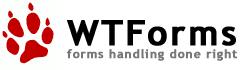
<style>
.page{position:relative;width:250px;height:70px;background:#ffffff}
.page>*{position:absolute;margin:0}
.t1{font:35px "TrebuchetMS-Bold";letter-spacing:0.06em;color:#000000;font-weight:bold}
.t2{font:12px "TrebuchetMS-Bold";letter-spacing:0.06em;color:#777777;font-weight:bold}
</style>
<div class="page">
<p class="t1" style="left:67px;top:20px;width:169px;height:26px">WTForms</p>
<p class="t2" style="left:67px;top:49px;width:170px;height:12px">forms handling done right</p>
</div>
